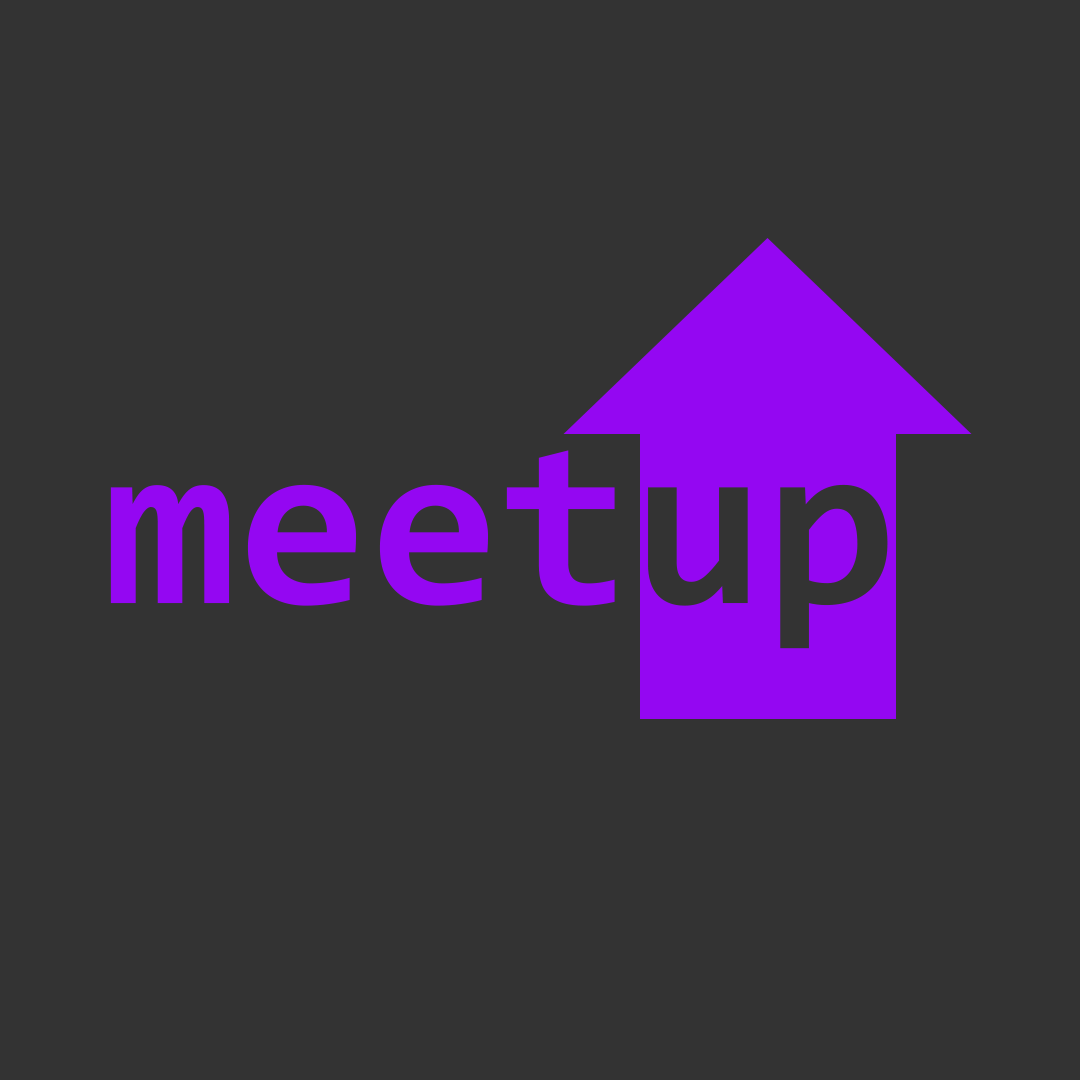
<style>
.page{position:relative;width:1080px;height:1080px;background:#333333}
.page>*{position:absolute;margin:0}
.t1{font:233px "Consolas-Bold";color:#9407f2}
</style>
<div class="page">
<p class="t1" style="left:110px;top:450px;width:505px;height:156px">meet</p>
</div>
